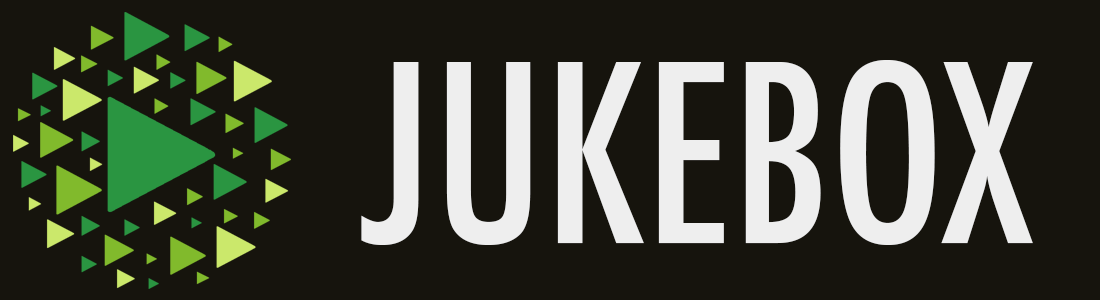
<style>
.page{position:relative;width:1100px;height:300px;background:#16140d}
.page>*{position:absolute;margin:0}
.t1{font:240px "Futura-CondensedMedium";color:#eeeeee}
</style>
<div class="page">
<p class="t1" style="left:361px;top:60px;width:672px;height:185px">JUKEBOX</p>
<p class="t1" style="left:361px;top:60px;width:672px;height:185px">JUKEBOX</p>
</div>
